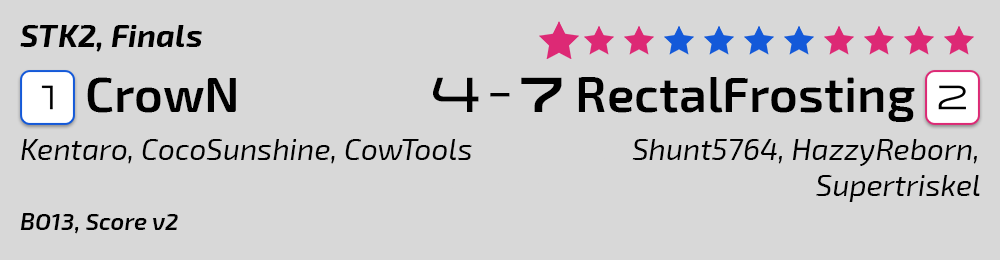
<style>
.page{position:relative;width:1000px;height:260px;background:#d8d8d8}
.page>*{position:absolute;margin:0}
.t1{font:32px "Exo2-BoldItalic";color:#000000}
.t2{font:50px "Exo2-SemiBold";color:#000000}
.t3{font:50px "Venera700";color:#000000}
.t4{font:50px "Venera900";color:#000000}
.t5{font:50px "Venera500";color:#000000}
.t6{font:30px "Exo2-Italic";color:#000000}
.t7{font:24px "Exo2-SemiBoldItalic";color:#000000}
</style>
<div class="page">
<p class="t1" style="left:20px;top:25px;width:182px;height:27px">STK2, Finals</p>
<p class="t2" style="left:87px;top:77px;width:149px;height:36px">CrowN</p>
<p class="t3" style="left:433px;top:77px;width:46px;height:35px">4</p>
<p class="t4" style="left:521px;top:77px;width:41px;height:35px">7</p>
<p class="t2" style="left:578px;top:77px;width:337px;height:45px">RectalFrosting</p>
<p class="t5" style="left:490px;top:93px;width:20px;height:4px">-</p>
<p class="t6" style="left:21px;top:139px;width:451px;height:25px">Kentaro, CocoSunshine, CowTools</p>
<p class="t6" style="left:632px;top:139px;width:348px;height:63px;text-align:right">Shunt5764, HazzyReborn,<br>Supertriskel</p>
<p class="t7" style="left:20px;top:213px;width:158px;height:21px">BO13, Score v2</p>
</div>
